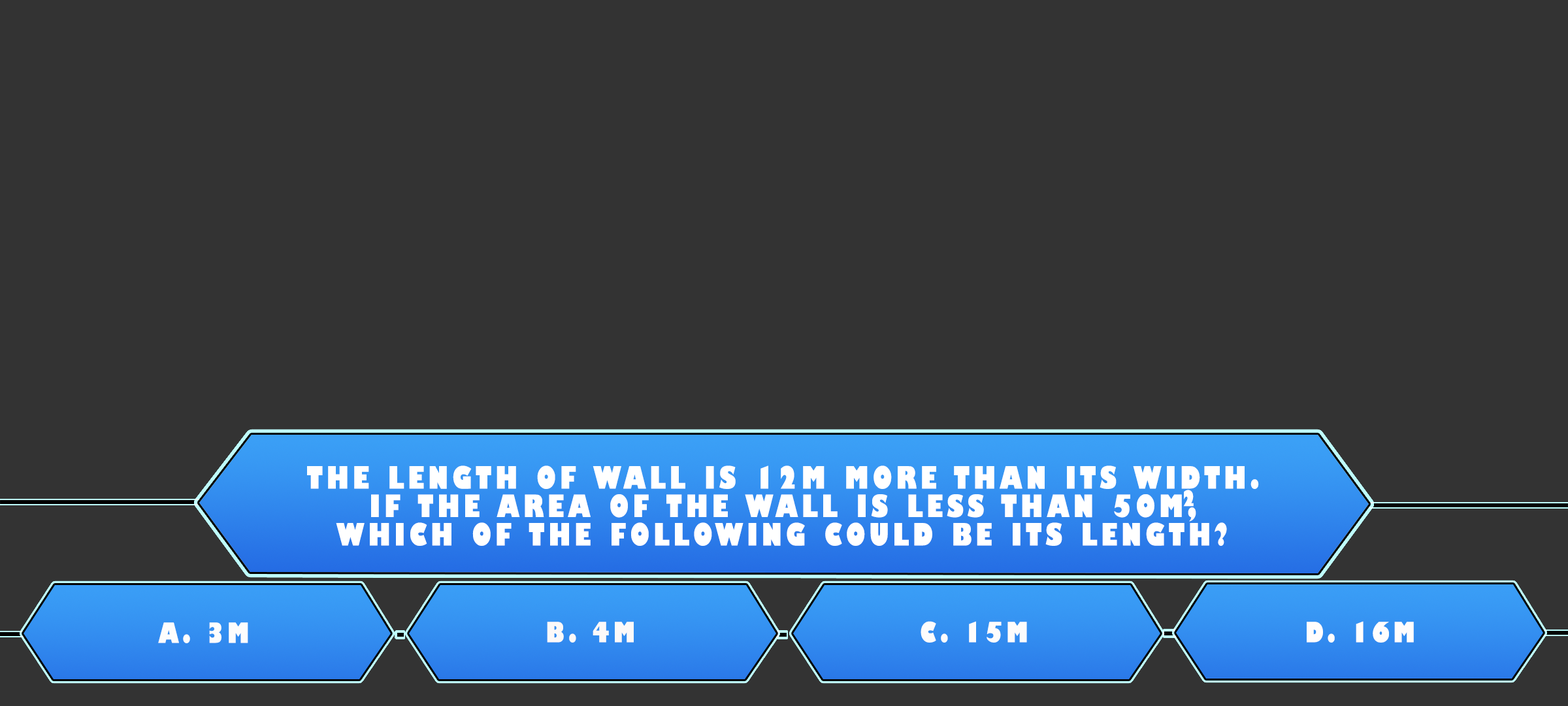
<style>
.page{position:relative;width:1568px;height:706px;background:#333333}
.page>*{position:absolute;margin:0}
.t1{font:30px/28.4px "GillSans-UltraBoldCondensed";letter-spacing:0.115em;color:#ffffff;text-transform:uppercase;scale:1.12 1}
.t2{font:21.1px "GillSans-UltraBoldCondensed";letter-spacing:0.115em;color:#ffffff;text-transform:uppercase;scale:1.11 1}
.t3{font:27.2px "GillSans-UltraBoldCondensed";letter-spacing:0.115em;color:#fdfdfd;text-transform:uppercase;scale:1.12 1}
.t4{font:27.2px "GillSans-UltraBoldCondensed";letter-spacing:0.115em;color:#fcf9f9;text-transform:uppercase;scale:1.12 1}
.t5{font:27.2px "GillSans-UltraBoldCondensed";letter-spacing:0.115em;color:#fdfcfc;text-transform:uppercase;scale:1.12 1}
.t6{font:27.2px "GillSans-UltraBoldCondensed";letter-spacing:0.115em;color:#fffdfd;text-transform:uppercase;scale:1.12 1}
</style>
<div class="page">
<p class="t1" style="left:307px;top:465px;width:952px;height:81px;text-align:center">The length of wall is 12m more than its width.<br>if the area of the wall is less than 50m,<br>which of the following could be its length?</p>
<p class="t2" style="left:1183px;top:489px;width:11px;height:17px">2</p>
<p class="t3" style="left:158px;top:622px;width:90px;height:21px">A. 3m</p>
<p class="t4" style="left:547px;top:621px;width:87px;height:21px">B. 4m</p>
<p class="t5" style="left:921px;top:621px;width:106px;height:21px">C. 15m</p>
<p class="t6" style="left:1307px;top:621px;width:107px;height:21px">D. 16m</p>
</div>
